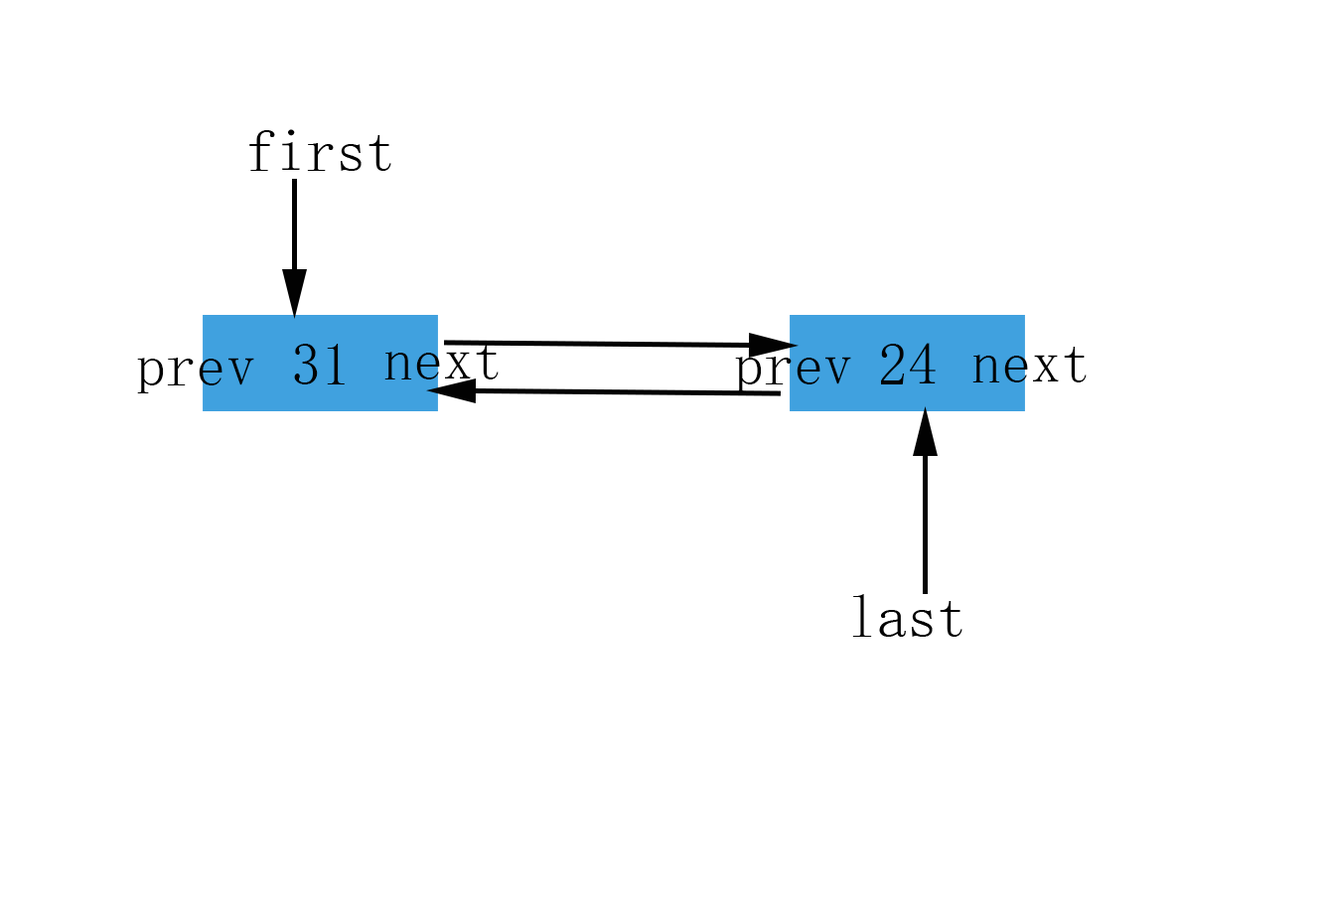
<style>
.page{position:relative;width:1326px;height:899px;background:#ffffff}
.page>*{position:absolute;margin:0}
.t1{font:59.6px "SimSun";color:#020202}
</style>
<div class="page">
<p class="t1" style="left:294px;top:344px;width:51px;height:40px">31</p>
<p class="t1" style="left:384px;top:344px;width:115px;height:36px">next</p>
<p class="t1" style="left:881px;top:343px;width:55px;height:41px">24</p>
<p class="t1" style="left:973px;top:347px;width:114px;height:35px">next</p>
<p class="t1" style="left:137px;top:358px;width:117px;height:35px">prev</p>
<p class="t1" style="left:735px;top:357px;width:116px;height:35px">prev</p>
</div>
